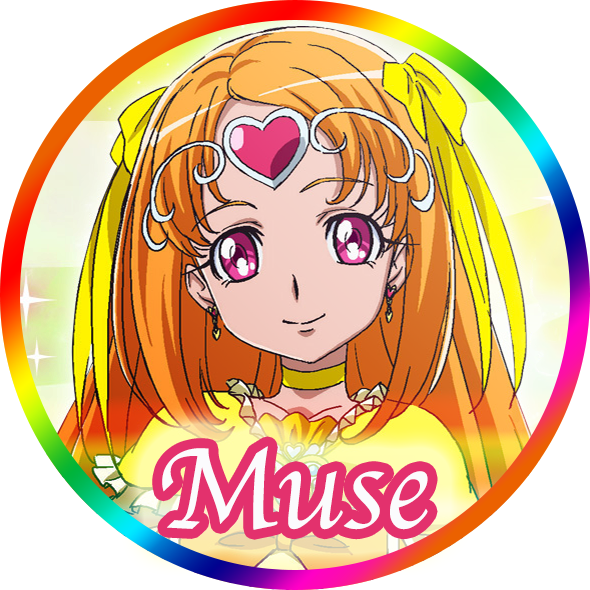
<style>
.page{position:relative;width:590px;height:590px;background:#ffffff}
.page>*{position:absolute;margin:0}
.t1{font:120px "Apple-Chancery";color:#fbfbfd}
</style>
<div class="page">
<p class="t1" style="left:162px;top:446px;width:266px;height:84px">Muse</p>
</div>
